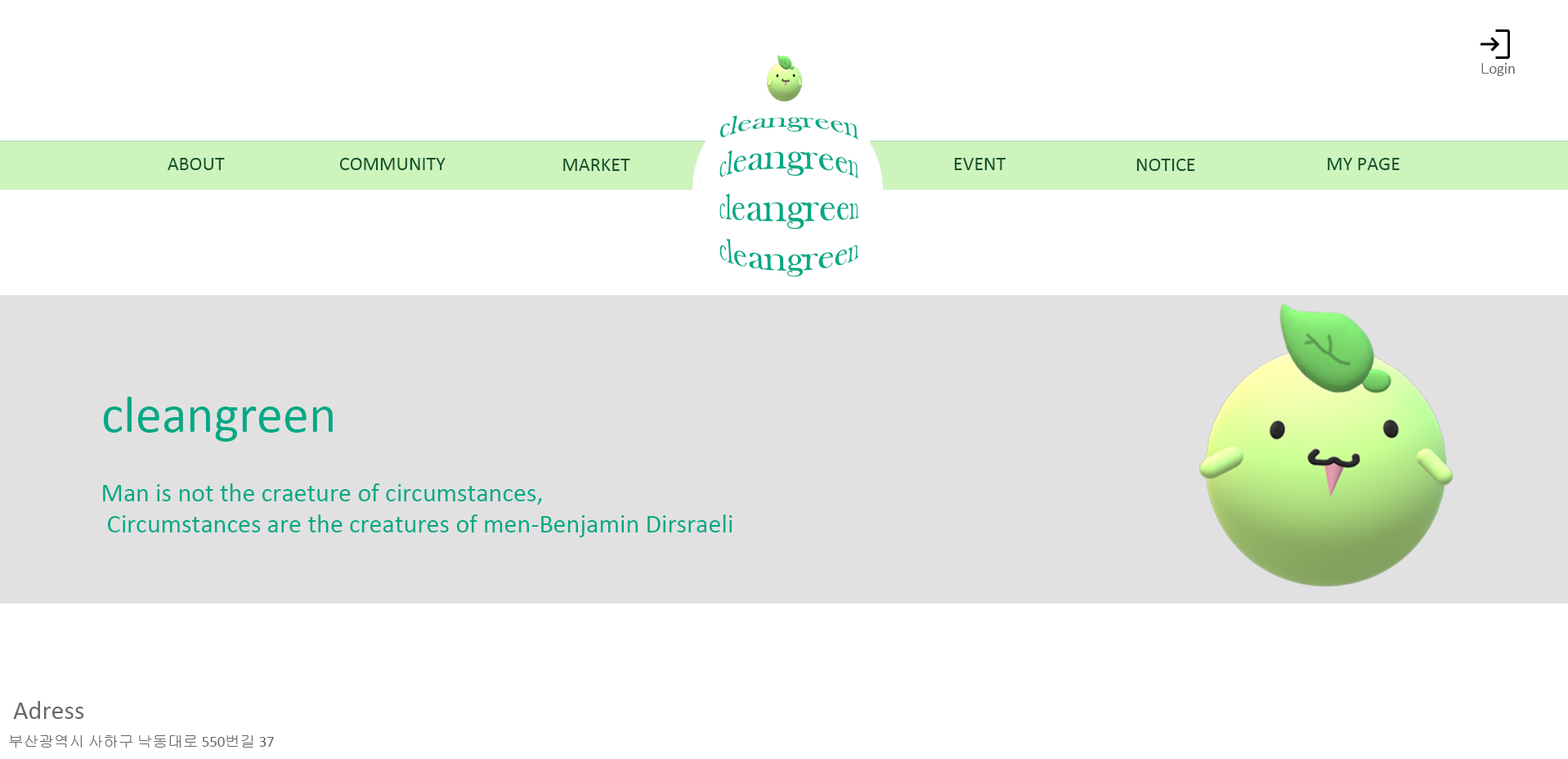
<style>
.page{position:relative;width:1568px;height:759px;background:#ffffff}
.page>*{position:absolute;margin:0}
.t1{font:15.3px "Calibri";color:#686868}
.t2{font:15.3px "Gulim";color:#686868}
.t3{font:32.7px "BaskOldFace";color:#00a986}
.t4{font:19.6px "Calibri";color:#12522e}
.t5{font:52.3px "Calibri";color:#00a986}
.t6{font:26.2px "Calibri";color:#00a986}
.t7{font:26.2px "Calibri";color:#686868}
</style>
<div class="page">
<p class="t1" style="left:1481px;top:63px;width:34px;height:13px"><span class="t2">L</span>ogin</p>
<p class="t3" style="left:719px;top:115px;width:139px;height:162px">cleangreen<br>cleangreen<br>cleangreen<br>cleangreen</p>
<p class="t4" style="left:168px;top:158px;width:57px;height:12px">ABOUT</p>
<p class="t4" style="left:339px;top:158px;width:107px;height:12px">COMMUNITY</p>
<p class="t4" style="left:563px;top:159px;width:67px;height:12px">MARKET</p>
<p class="t4" style="left:954px;top:158px;width:52px;height:12px">EVENT</p>
<p class="t4" style="left:1136px;top:159px;width:59px;height:12px">NOTICE</p>
<p class="t4" style="left:1328px;top:158px;width:72px;height:12px">MY PAGE</p>
<p class="t5" style="left:103px;top:396px;width:230px;height:45px">cleangreen</p>
<p class="t6" style="left:103px;top:483px;width:629px;height:54px">Man is not the craeture of circumstances,<br> Circumstances are the creatures of men-Benjamin Dirsraeli</p>
<p class="t7" style="left:13px;top:701px;width:71px;height:18px">Adress</p>
<p class="t2" style="left:9px;top:735px;width:265px;height:12px">부산광역시 사하구 낙동대로<span class="t1"> 550</span>번길<span class="t1"> 37</span></p>
</div>
